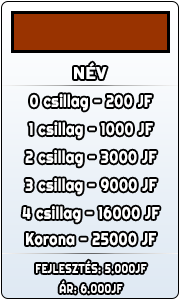
<style>
.page{position:relative;width:180px;height:300px}
.page>*{position:absolute;margin:0}
.t1{font:16.7px "Righteous-Regular";letter-spacing:0.035em;color:#ffffff;font-weight:bold}
.t2{font:16.7px "Righteous-Regular";letter-spacing:0.035em;color:#ffffff;font-weight:bold;scale:0.8 1}
.t3{font:12.5px "Righteous-Regular";letter-spacing:0.035em;color:#ffffff;font-weight:bold;scale:0.8 1}
</style>
<div class="page">
<p class="t1" style="left:74px;top:62px;width:33px;height:17px">NÉV</p>
<p class="t2" style="left:30px;top:94px;width:122px;height:17px">0 csillag - 200 JF</p>
<p class="t2" style="left:29px;top:122px;width:124px;height:17px">1 csillag - 1000 JF</p>
<p class="t2" style="left:25px;top:150px;width:132px;height:17px">2 csillag - 3000 JF</p>
<p class="t2" style="left:25px;top:178px;width:132px;height:17px">3 csillag - 9000 JF</p>
<p class="t2" style="left:22px;top:206px;width:138px;height:17px">4 csillag - 16000 JF</p>
<p class="t2" style="left:26px;top:232px;width:130px;height:14px">Korona - 25000 JF</p>
<p class="t3" style="left:36px;top:260px;width:111px;height:14px">FEJLESZTÉS: 5.000JF</p>
<p class="t3" style="left:59px;top:280px;width:64px;height:14px">ÁR: 6.000JF</p>
</div>
